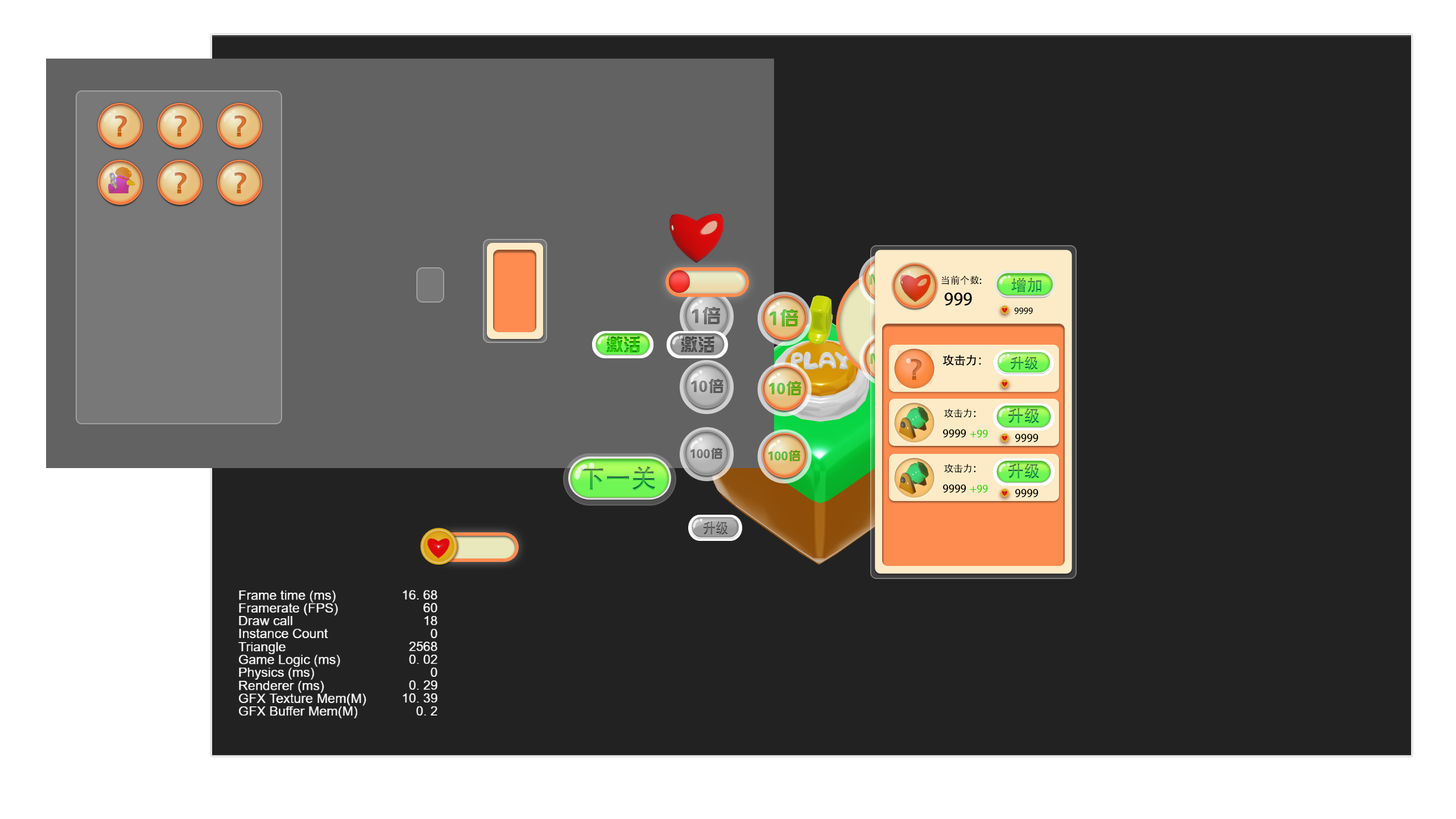
<style>
.page{position:relative;width:1456px;height:819px;background:#222222}
.page>*{position:absolute;margin:0}
.t1{font:28.4px "FZZYJW--GB1-0"}
.t2{font:9.6px "AdobeHeitiStd-Regular";color:#000000}
.t3{font:15.8px "AdobeHeitiStd-Regular"}
.t4{font:16.8px "AdobeHeitiStd-Regular";color:#000000}
.t5{font:19.5px "FZZYJW--GB1-0"}
.t6{font:8.3px "AdobeHeitiStd-Regular";color:#000000}
.t7{font:17.7px "FZZYJW--GB1-0"}
.t8{font:11.5px "AdobeHeitiStd-Regular";color:#000000}
.t9{font:14.6px "AdobeHeitiStd-Regular"}
.t10{font:15.9px "FZZYJW--GB1-0"}
.t11{font:9.5px "AdobeHeitiStd-Regular";color:#000000}
.t12{font:16.5px "AdobeHeitiStd-Regular"}
.t13{font:10.5px "AdobeHeitiStd-Regular";color:#000000}
.t14{font:10.1px "AdobeHeitiStd-Regular";color:#29da00}
.t15{font:12.3px "FZZYJW--GB1-0"}
.t16{font:25.8px "AdobeHeitiStd-Regular"}
</style>
<div class="page">
<p class="t1" style="left:115px;top:115px;width:12px;height:21px">?</p>
<p class="t1" style="left:175px;top:115px;width:12px;height:21px">?</p>
<p class="t1" style="left:234px;top:115px;width:12px;height:21px">?</p>
<p class="t1" style="left:175px;top:172px;width:12px;height:21px">?</p>
<p class="t1" style="left:234px;top:172px;width:12px;height:21px">?</p>
<p class="t2" style="left:941px;top:275px;width:41px;height:10px">当前个数:</p>
<p class="t3" style="left:1011px;top:278px;width:30px;height:15px">增加</p>
<p class="t4" style="left:944px;top:292px;width:28px;height:14px">999</p>
<p class="t5" style="left:770px;top:309px;width:28px;height:18px">1倍</p>
<p class="t6" style="left:1014px;top:307px;width:19px;height:8px">9999</p>
<p class="t7" style="left:606px;top:336px;width:34px;height:17px">激活</p>
<p class="t1" style="left:909px;top:359px;width:13px;height:21px">?</p>
<p class="t8" style="left:943px;top:355px;width:38px;height:11px">攻击力：</p>
<p class="t9" style="left:1011px;top:356px;width:27px;height:14px">升级</p>
<p class="t10" style="left:769px;top:381px;width:32px;height:15px">10倍</p>
<p class="t11" style="left:944px;top:408px;width:32px;height:10px">攻击力：</p>
<p class="t12" style="left:1008px;top:408px;width:31px;height:16px">升级</p>
<p class="t13" style="left:943px;top:429px;width:23px;height:9px">9999</p>
<p class="t14" style="left:970px;top:429px;width:18px;height:9px">+99</p>
<p class="t13" style="left:1015px;top:433px;width:24px;height:9px">9999</p>
<p class="t15" style="left:768px;top:450px;width:32px;height:11px">100倍</p>
<p class="t16" style="left:581px;top:466px;width:74px;height:24px">下一关</p>
<p class="t11" style="left:944px;top:464px;width:32px;height:9px">攻击力：</p>
<p class="t12" style="left:1008px;top:464px;width:31px;height:15px">升级</p>
<p class="t13" style="left:943px;top:484px;width:23px;height:9px">9999</p>
<p class="t14" style="left:970px;top:485px;width:18px;height:8px">+99</p>
<p class="t13" style="left:1015px;top:489px;width:24px;height:9px">9999</p>
</div>
